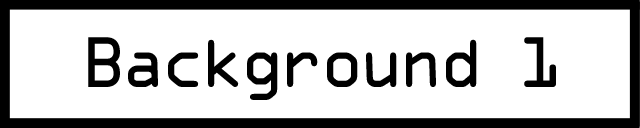
<style>
.page{position:relative;width:640px;height:128px;background:#ffffff}
.page>*{position:absolute;margin:0}
.t1{font:64px "OCRAStd";letter-spacing:-0.1em;color:#000000}
</style>
<div class="page">
<p class="t1" style="left:88px;top:37px;width:468px;height:63px">Background 1</p>
</div>
